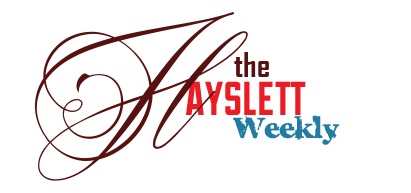
<style>
.page{position:relative;width:411px;height:193px;background:#ffffff}
.page>*{position:absolute;margin:0}
.t1{font:166.7px "BeakedTyrantPersonalUse";color:#561210}
.t2{font:33.3px "AgencyFB-Bold";color:#561210}
.t3{font:58.3px "Duke-Fill";color:#ed1c24}
.t4{font:50px "CharlesS.";color:#217ca3}
</style>
<div class="page">
<p class="t1" style="left:34px;top:12px;width:214px;height:169px">H</p>
<p class="t2" style="left:234px;top:52px;width:35px;height:25px">the</p>
<p class="t3" style="left:186px;top:81px;width:120px;height:34px">ayslett</p>
<p class="t4" style="left:232px;top:115px;width:108px;height:30px">Weekly</p>
</div>
